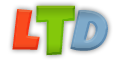
<style>
.page{position:relative;width:120px;height:60px;background:#ffffff}
.page>*{position:absolute;margin:0}
.t1{font:72px "LuckiestGuy-Regular";color:#7ebb0a}
.t2{font:60px "LuckiestGuy-Regular";color:#f94b1e}
.t3{font:60px "LuckiestGuy-Regular";color:#7da5c4}
</style>
<div class="page">
<p class="t1" style="left:36px;top:5px;width:39px;height:51px">T</p>
<p class="t2" style="left:12px;top:9px;width:28px;height:41px;rotate:5deg">L</p>
<p class="t3" style="left:70px;top:10px;width:38px;height:41px;rotate:11deg">D</p>
</div>
